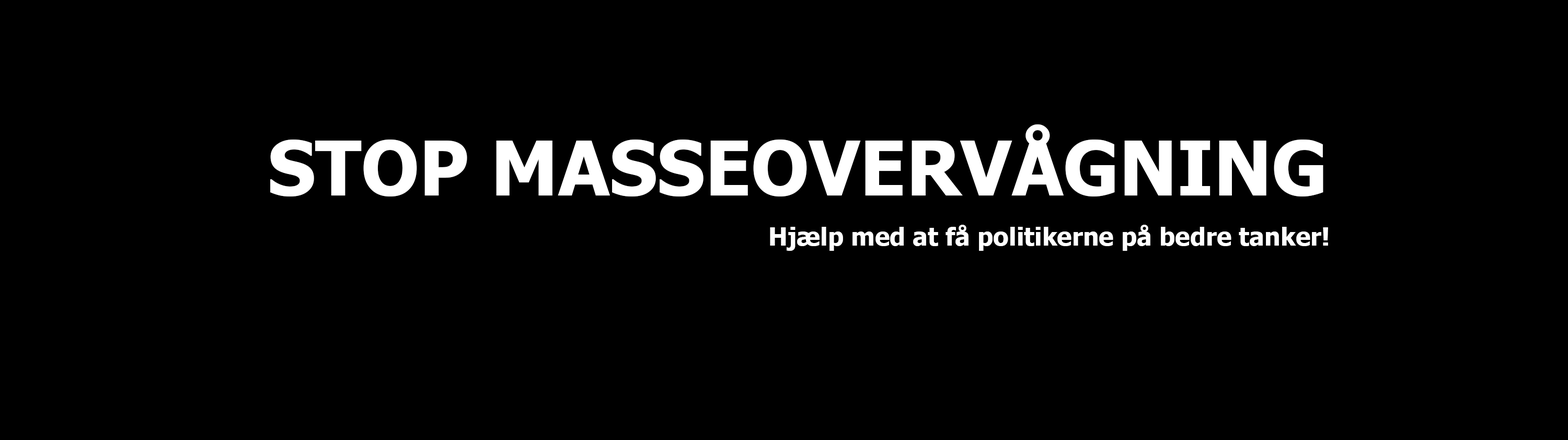
<style>
.page{position:relative;width:1568px;height:440px;background:#000000}
.page>*{position:absolute;margin:0}
.t1{font:75.3px "Tahoma-Bold";color:#ffffff}
.t2{font:25.1px "Tahoma-Bold";color:#ffffff}
</style>
<div class="page">
<p class="t1" style="left:270px;top:124px;width:1053px;height:73px">STOP MASSEOVERVÅGNING</p>
<p class="t2" style="left:770px;top:225px;width:558px;height:26px">Hjælp med at få politikerne på bedre tanker!</p>
</div>
